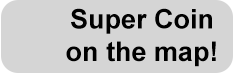
<style>
.page{position:relative;width:233px;height:73px;background:#d5d5d5}
.page>*{position:absolute;margin:0}
.t1{font:27px "Arial-BoldMT";color:#000000}
</style>
<div class="page">
<p class="t1" style="left:66px;top:8px;width:150px;height:59px;text-align:center">Super Coin<br>on the map!</p>
</div>
